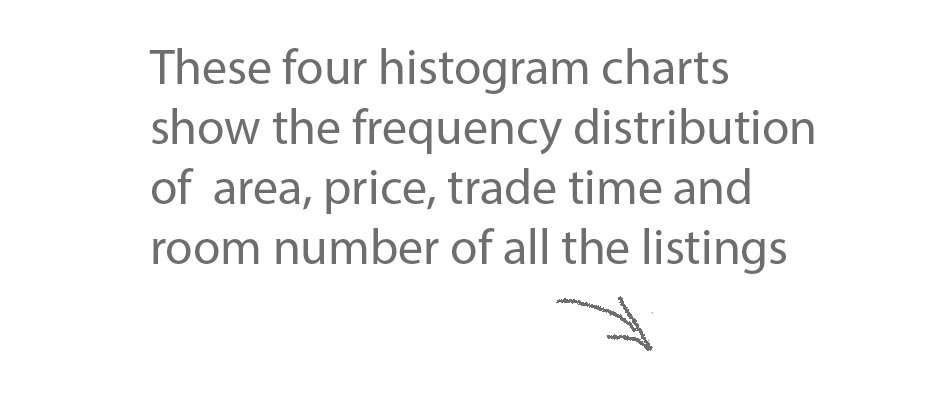
<style>
.page{position:relative;width:950px;height:414px;background:#ffffff}
.page>*{position:absolute;margin:0}
.t1{font:50px "MyriadPro-Regular";color:#6e6e6e}
</style>
<div class="page">
<p class="t1" style="left:149px;top:48px;width:665px;height:226px">These four histogram charts<br>show the frequency distribution<br>of  area, price, trade time and <br>room number of all the listings</p>
</div>
